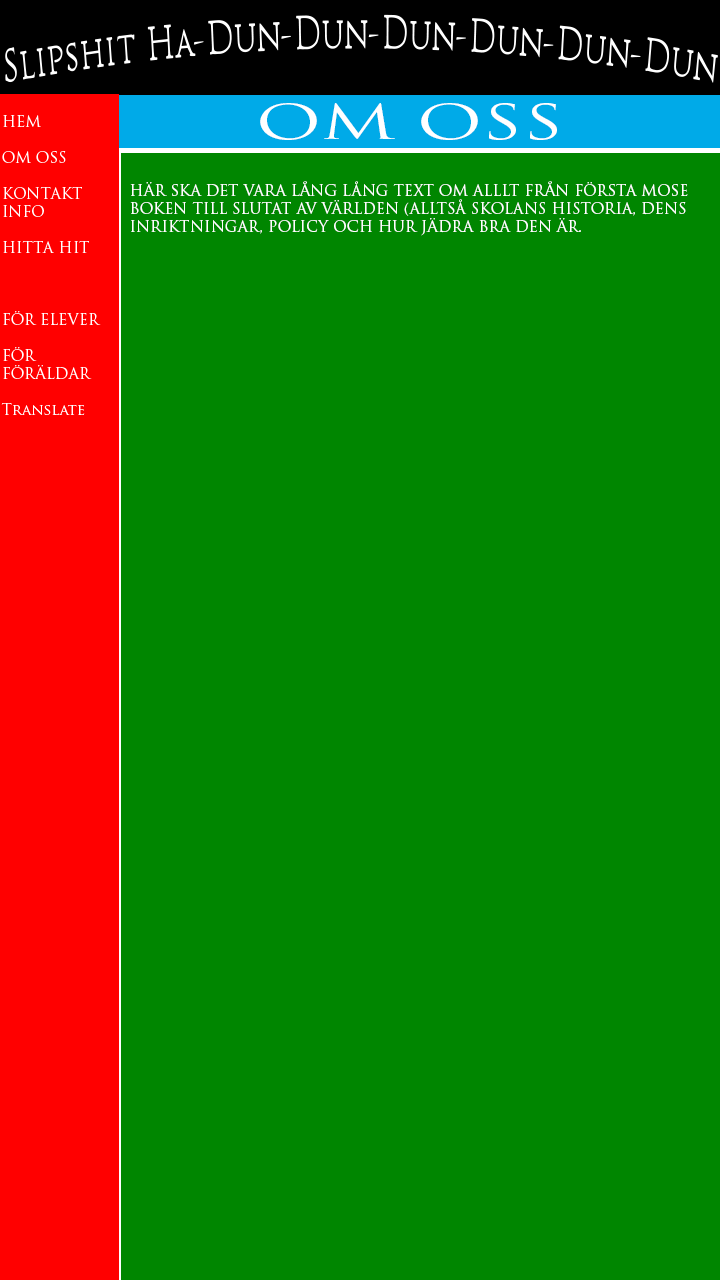
<style>
.page{position:relative;width:720px;height:1280px;background:#008600}
.page>*{position:absolute;margin:0}
.t1{font:46.3px "TrajanPro-Regular";color:#ffffff;scale:1.53 1}
.t2{font:15px "TrajanPro-Regular";color:#ffffff}
</style>
<div class="page">
<p class="t1" style="left:260px;top:103px;width:297px;height:37px">OM OSS</p>
<p class="t2" style="left:130px;top:181px;width:558px;height:55px">HÄR SKA DET VARA LÅNG LÅNG TEXT OM ALLLT FRÅN FÖRSTA MOSE<br>BOKEN TILL SLUTAT AV VÄRLDEN (ALLTSÅ SKOLANS HISTORIA, DENS <br>INRIKTNINGAR, POLICY OCH HUR JÄDRA BRA DEN ÄR.</p>
</div>
